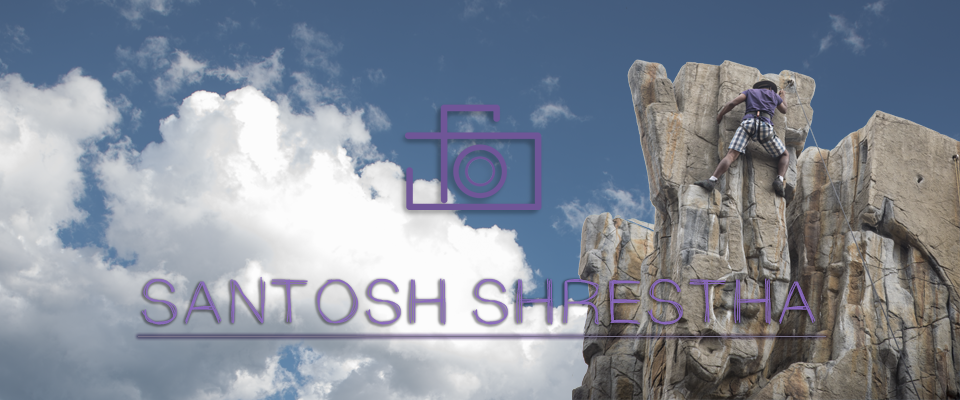
<style>
.page{position:relative;width:960px;height:400px}
.page>*{position:absolute;margin:0}
.t1{font:63.8px "Sketchtica";color:#8764bc}
</style>
<div class="page">
<p class="t1" style="left:142px;top:276px;width:674px;height:49px">SANTOSH SHRESTHA</p>
</div>
